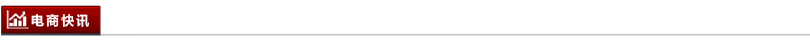
<style>
.page{position:relative;width:810px;height:40px;background:#ffffff}
.page>*{position:absolute;margin:0}
.t1{font:13px "MicrosoftYaHei";letter-spacing:0.16em;color:#ffffff}
</style>
<div class="page">
<p class="t1" style="left:31px;top:14px;width:59px;height:13px">电商快讯</p>
</div>
